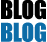
<style>
.page{position:relative;width:47px;height:42px;background:#000000}
.page>*{position:absolute;margin:0}
.t1{font:24px/11.4px "Impact";letter-spacing:-0.025em;color:#000000}
.t2{font:24px/11.4px "Impact";letter-spacing:-0.025em;color:#0c6ca7}
</style>
<div class="page">
<p class="t1" style="left:1px;top:0px;width:45px;height:42px;text-align:center">BLOG<br><span class="t2"><br>BLOG</span></p>
</div>
